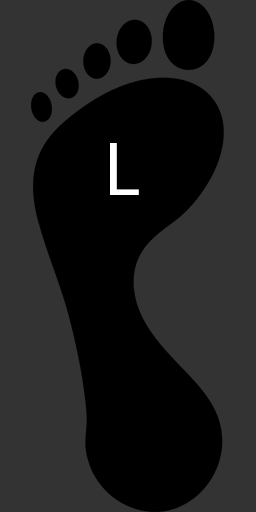
<style>
.page{position:relative;width:256px;height:512px;background:#333333}
.page>*{position:absolute;margin:0}
.t1{font:76.9px "MyriadPro-Regular";color:#ffffff}
</style>
<div class="page">
<p class="t1" style="left:110px;top:143px;width:29px;height:52px">L</p>
</div>
